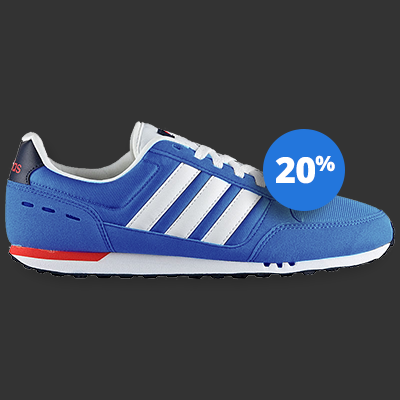
<style>
.page{position:relative;width:400px;height:400px;background:#333333}
.page>*{position:absolute;margin:0}
.t1{font:36px "OpenSans-Extrabold";letter-spacing:-0.025em;color:#ffffff}
</style>
<div class="page">
<p class="t1" style="left:275px;top:155px;width:60px;height:29px">20%</p>
</div>
